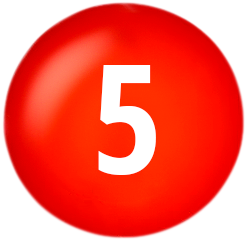
<style>
.page{position:relative;width:246px;height:240px;background:#ffffff}
.page>*{position:absolute;margin:0}
.t1{font:152.2px "OpenSans-CondensedBold";color:#ffffff;text-transform:uppercase}
</style>
<div class="page">
<p class="t1" style="left:98px;top:65px;width:58px;height:110px">5</p>
</div>
